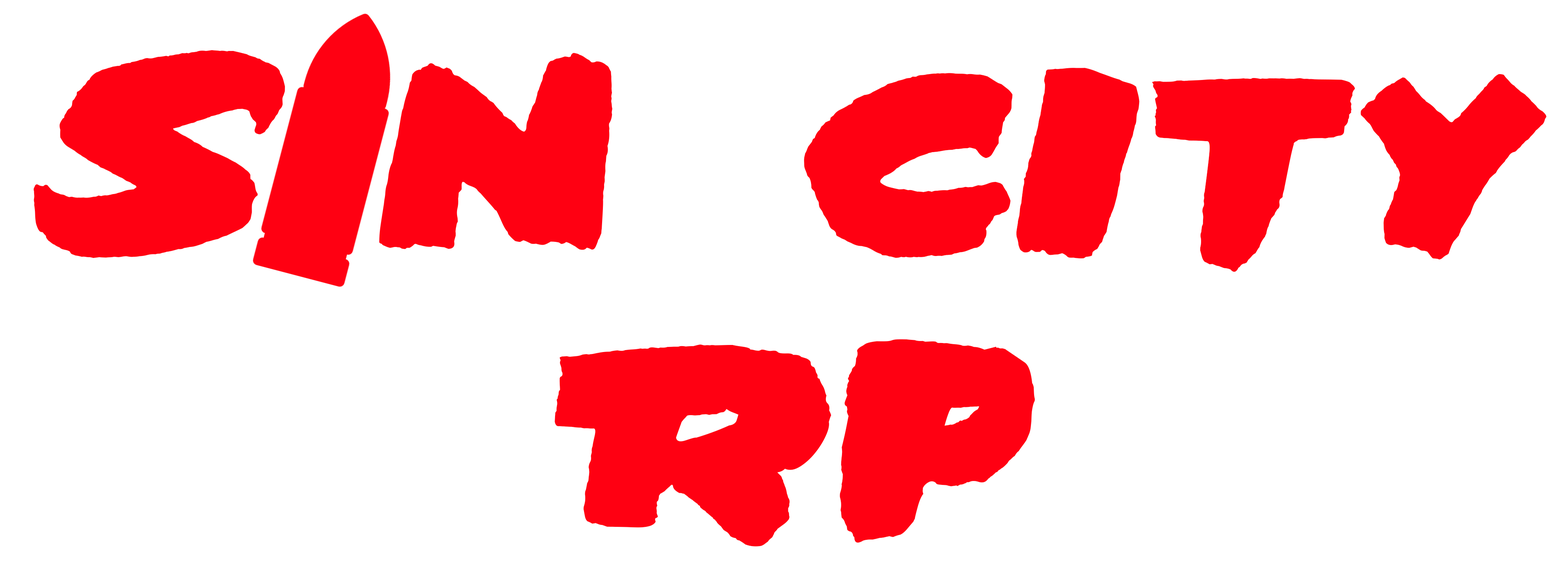
<style>
.page{position:relative;width:1568px;height:588px;background:#ffffff}
.page>*{position:absolute;margin:0}
.t1{font:195.4px "SinCity-Regular";letter-spacing:0.01em;color:#ff0012}
</style>
<div class="page">
<p class="t1" style="left:797px;top:73px;width:743px;height:204px">City</p>
<p class="t1" style="left:804px;top:68px;width:742px;height:204px">City</p>
<p class="t1" style="left:555px;top:339px;width:480px;height:207px">Rp</p>
<p class="t1" style="left:548px;top:344px;width:480px;height:207px">Rp</p>
</div>
